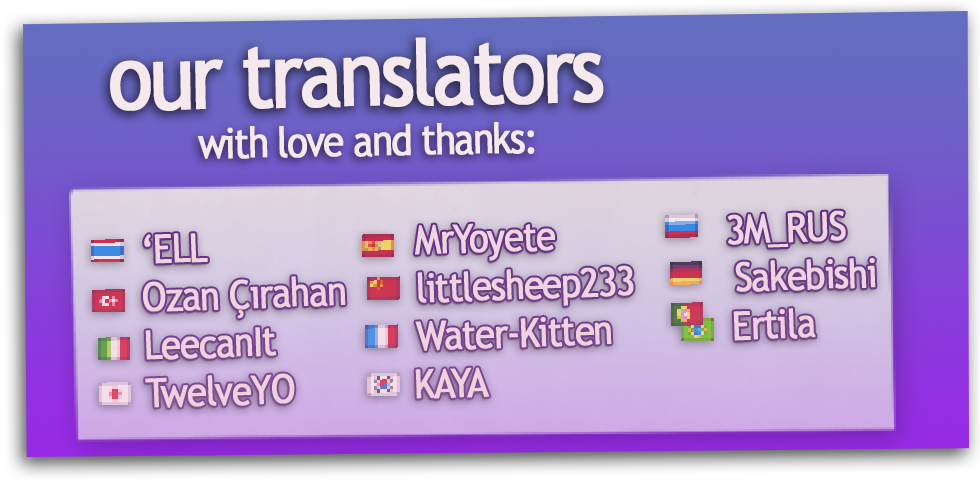
<style>
.page{position:relative;width:980px;height:480px}
.page>*{position:absolute;margin:0}
.t1{font:90px "TrebuchetMS";letter-spacing:-0.06em;color:#f5e9ee;font-weight:bold;scale:0.9 1}
.t2{font:42px "TrebuchetMS";letter-spacing:-0.06em;color:#f5e9ee;font-weight:bold;scale:0.9 1}
.t3{font:40px "TrebuchetMS";letter-spacing:-0.05em;color:#f5e9ee;font-weight:bold;scale:0.9 1}
</style>
<div class="page">
<p class="t1" style="left:110px;top:37px;width:494px;height:74px;rotate:-1deg">our translators</p>
<p class="t2" style="left:198px;top:122px;width:337px;height:37px;rotate:-1deg">with love and thanks:</p>
<p class="t3" style="left:143px;top:210px;width:733px;height:198px;rotate:-2deg">‘ELL                     MrYoyete                 3M_RUS<br>Ozan Çırahan       littlesheep233          Sakebishi<br>LeecanIt              Water-Kitten            Ertila<br>TwelveYO            KAYA</p>
</div>
